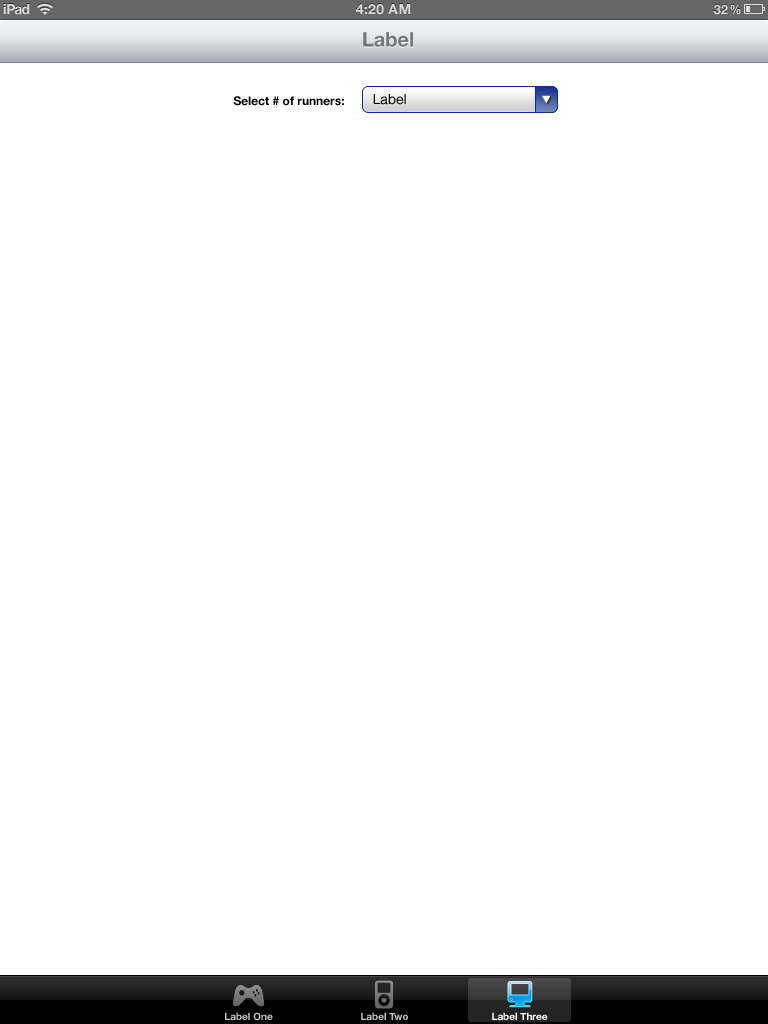
<style>
.page{position:relative;width:768px;height:1024px;background:#ffffff}
.page>*{position:absolute;margin:0}
.t1{font:14px "HelveticaNeue-Bold";letter-spacing:-0.06em;color:#d9d9d9}
.t2{font:14px "HelveticaNeue-Bold";color:#d9d9d9;text-transform:uppercase}
.t3{font:13px "HelveticaNeue-Bold";color:#d9d9d9;text-transform:uppercase}
.t4{font:13px "HelveticaNeue-Bold";color:#d9d9d9;text-transform:uppercase;scale:0.89 1}
.t5{font:20px "HelveticaNeue-Bold";color:#717880}
.t6{font:12px "HelveticaNeue-Bold";color:#000000}
.t7{font:14px "HelveticaNeue";color:#090909}
.t8{font:10px "HelveticaNeue-Bold";color:#c6c6c5}
.t9{font:10px "HelveticaNeue-Bold";color:#ffffff}
</style>
<div class="page">
<p class="t1" style="left:3px;top:4px;width:27px;height:11px">iPad</p>
<p class="t2" style="left:356px;top:4px;width:55px;height:11px">4:20 AM</p>
<p class="t3" style="left:713px;top:4px;width:28px;height:11px">32<span class="t4">%</span></p>
<p class="t5" style="left:363px;top:32px;width:50px;height:15px">Label</p>
<p class="t6" style="left:233px;top:96px;width:111px;height:10px">Select # of runners:</p>
<p class="t7" style="left:373px;top:94px;width:33px;height:11px">Label</p>
<p class="t8" style="left:225px;top:1012px;width:48px;height:9px">Label One</p>
<p class="t8" style="left:361px;top:1012px;width:47px;height:9px">Label Two</p>
<p class="t9" style="left:492px;top:1012px;width:56px;height:9px">Label Three</p>
</div>
